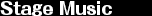
<style>
.page{position:relative;width:152px;height:16px;background:#000000}
.page>*{position:absolute;margin:0}
.t1{font:17.2px "FolkPro-Heavy";color:#ffffff}
</style>
<div class="page">
<p class="t1" style="left:0px;top:1px;width:112px;height:17px">Stage Music</p>
<p class="t1" style="left:0px;top:0px;width:112px;height:17px">Stage Music</p>
</div>
